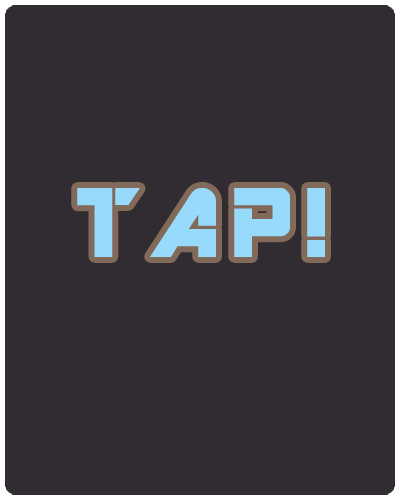
<style>
.page{position:relative;width:400px;height:500px;background:#312c32}
.page>*{position:absolute;margin:0}
.t1{font:110px "ARDESTINE";letter-spacing:0.1em;color:#98dafc}
</style>
<div class="page">
<p class="t1" style="left:77px;top:188px;width:248px;height:69px">TAP!</p>
</div>
